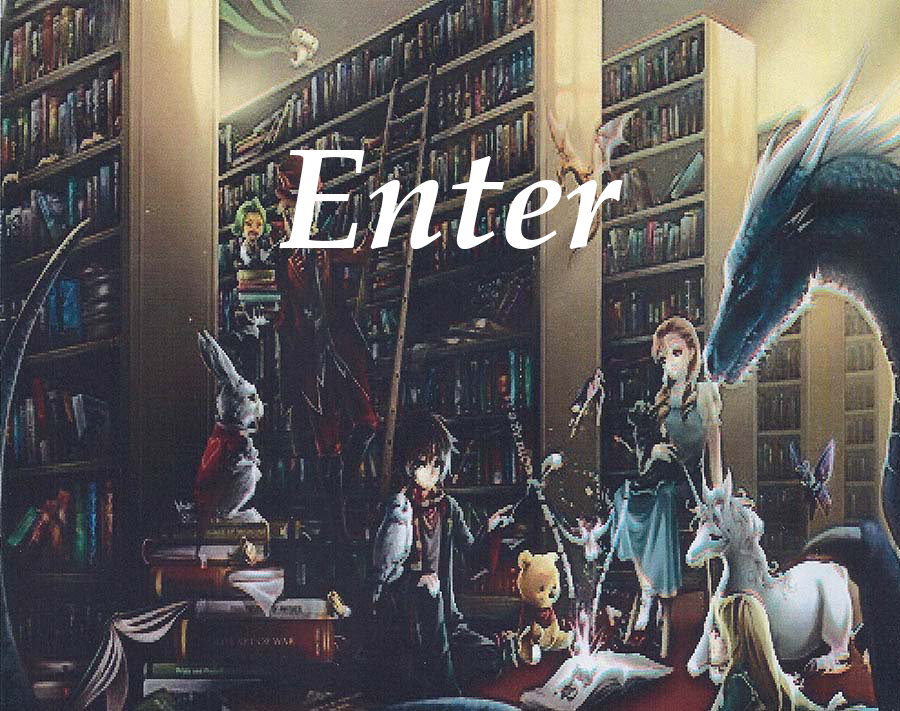
<style>
.page{position:relative;width:900px;height:711px}
.page>*{position:absolute;margin:0}
.t1{font:141.7px "BookAntiqua-BoldItalic";color:#ffffff}
</style>
<div class="page">
<p class="t1" style="left:279px;top:150px;width:344px;height:99px">Enter</p>
</div>
